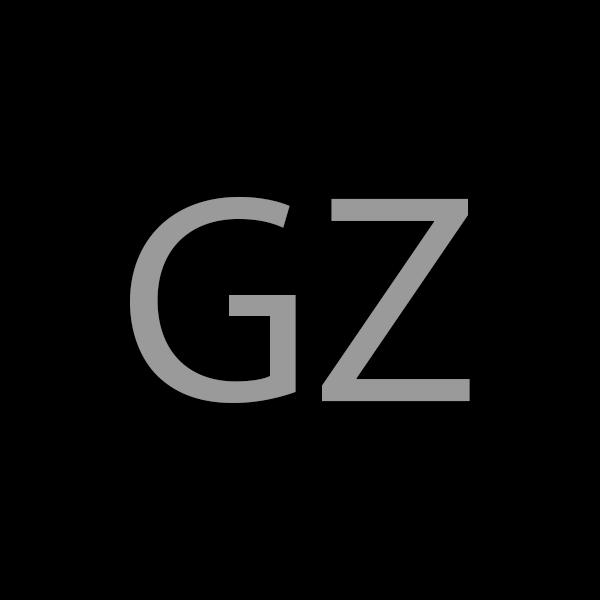
<style>
.page{position:relative;width:600px;height:600px;background:#000000}
.page>*{position:absolute;margin:0}
.t1{font:300px "MyriadPro-Regular";color:#9a9a9a}
</style>
<div class="page">
<p class="t1" style="left:130px;top:196px;width:340px;height:207px">GZ</p>
</div>
